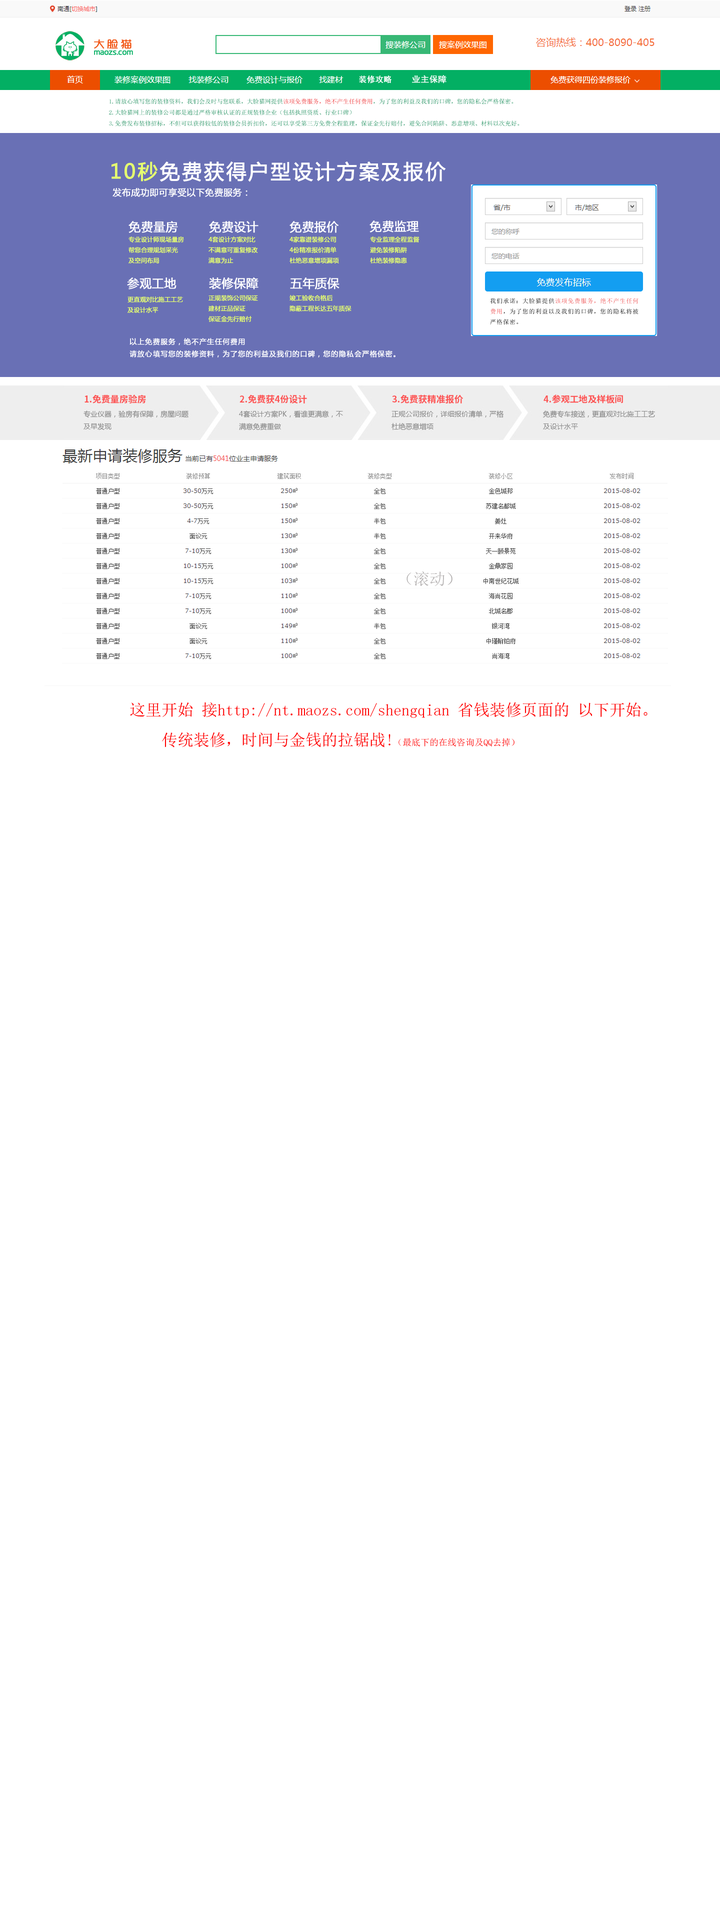
<style>
.page{position:relative;width:720px;height:1926px;background:#ffffff}
.page>*{position:absolute;margin:0}
.t1{font:6px/11px "NSimSun";color:#108853}
.t2{font:6px/11px "NSimSun";color:#ed2123}
.t3{font:20px "MicrosoftYaHei";letter-spacing:0.08em;color:#ffffff;font-weight:bold}
.t4{font:20px "MicrosoftYaHei";letter-spacing:0.08em;color:#e5fe70;font-weight:bold}
.t5{font:9px "MicrosoftYaHei";color:#ffffff;font-weight:bold}
.t6{font:12px "MicrosoftYaHei";color:#ffffff;font-weight:bold}
.t7{font:6px "MicrosoftYaHei";color:#e5fe70;font-weight:bold}
.t8{font:6px "NSimSun";letter-spacing:0.08em;color:#000000}
.t9{font:6px "NSimSun";letter-spacing:0.08em;color:#ec3c3d}
.t10{font:7px "MicrosoftYaHei";letter-spacing:0.08em;color:#ffffff;font-weight:bold}
.t11{font:16px "NSimSun";color:#b5b2b2}
.t12{font:16px/15px "NSimSun";color:#ff0000}
.t13{font:9px/15px "NSimSun";color:#ff0000}
</style>
<div class="page">
<p class="t1" style="left:109px;top:98px;width:411px;height:28px">1.请放心填写您的装修资料，我们会及时与您联系，大脸猫网提供<span class="t2">该项免费服务，绝不产生任何费用</span>，为了您的利益及我们的口碑，您的隐私会严格保密。<br>2.大脸猫网上的装修公司都是通过严格审核认证的正规装修企业（包括执照资质、行业口碑）<br>3.免费发布装修招标，不但可以获得较低的装修会员折扣价，还可以享受第三方免费全程监理，保证金先行赔付，避免合同陷阱、恶意增项、材料以次充好。</p>
<p class="t3" style="left:112px;top:161px;width:334px;height:21px"><span class="t4">10秒</span>免费获得户型设计方案及报价</p>
<p class="t5" style="left:112px;top:188px;width:136px;height:9px">发布成功即可享受以下免费服务：</p>
<p class="t6" style="left:128px;top:221px;width:50px;height:12px">免费量房</p>
<p class="t6" style="left:209px;top:221px;width:49px;height:12px">免费设计</p>
<p class="t6" style="left:290px;top:221px;width:49px;height:12px">免费报价</p>
<p class="t6" style="left:370px;top:220px;width:49px;height:12px">免费监理</p>
<p class="t7" style="left:128px;top:236px;width:56px;height:28px">专业设计师现场量房<br>帮您合理规划采光<br>及空间布局</p>
<p class="t7" style="left:208px;top:236px;width:50px;height:28px">4套设计方案对比<br>不满意可重复修改<br>满意为止</p>
<p class="t7" style="left:290px;top:236px;width:49px;height:28px">4家靠谱装修公司<br>4份精准报价清单<br>杜绝恶意增项漏项</p>
<p class="t7" style="left:370px;top:236px;width:50px;height:28px">专业监理全程监督<br>避免装修陷阱<br>杜绝装修隐患</p>
<p class="t6" style="left:127px;top:278px;width:49px;height:12px">参观工地</p>
<p class="t6" style="left:209px;top:277px;width:49px;height:13px">装修保障</p>
<p class="t6" style="left:290px;top:278px;width:50px;height:12px">五年质保</p>
<p class="t7" style="left:128px;top:296px;width:55px;height:17px">更直观对比施工工艺<br>及设计水平</p>
<p class="t7" style="left:208px;top:295px;width:50px;height:27px">正规装饰公司保证 <br>建材正品保证<br>保证金先行赔付</p>
<p class="t7" style="left:290px;top:295px;width:62px;height:17px">竣工验收合格后<br>隐蔽工程长达五年质保</p>
<p class="t8" style="left:490px;top:298px;width:148px;height:27px">我们承诺：大脸猫提供<span class="t9">该项免费服务，绝不产生任何<br>费用</span>，为了您的利益以及我们的口碑，您的隐私将被<br>严格保密。</p>
<p class="t10" style="left:130px;top:338px;width:266px;height:20px">以上免费服务，绝不产生任何费用<br>请放心填写您的装修资料，为了您的利益及我们的口碑，您的隐私会严格保密。</p>
<p class="t11" style="left:406px;top:571px;width:46px;height:15px">（滚动）</p>
<p class="t12" style="left:130px;top:702px;width:518px;height:46px">这里开始 接http://nt.maozs.com/shengqian 省钱装修页面的 以下开始。<br><br>    传统装修，时间与金钱的拉锯战!<span class="t13">（最底下的在线咨询及QQ去掉）</span></p>
</div>
